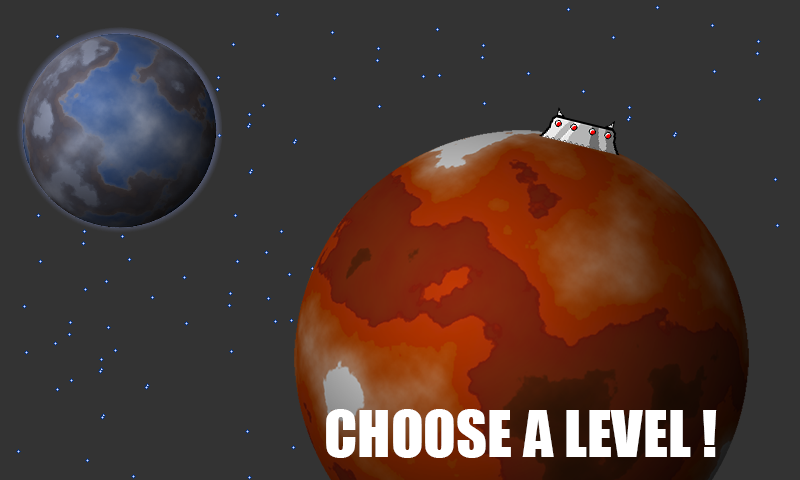
<style>
.page{position:relative;width:800px;height:480px;background:#333333}
.page>*{position:absolute;margin:0}
.t1{font:60px "Impact";color:#ffffff}
</style>
<div class="page">
<p class="t1" style="left:326px;top:409px;width:391px;height:49px">CHOOSE A LEVEL !</p>
</div>
